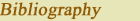
<style>
.page{position:relative;width:140px;height:21px;background:#e6e6b8}
.page>*{position:absolute;margin:0}
.t1{font:18px "TimesNewRomanPSMT";color:#915c07;font-weight:bold;font-style:italic}
</style>
<div class="page">
<p class="t1" style="left:0px;top:2px;width:102px;height:18px">Bibliography</p>
</div>
